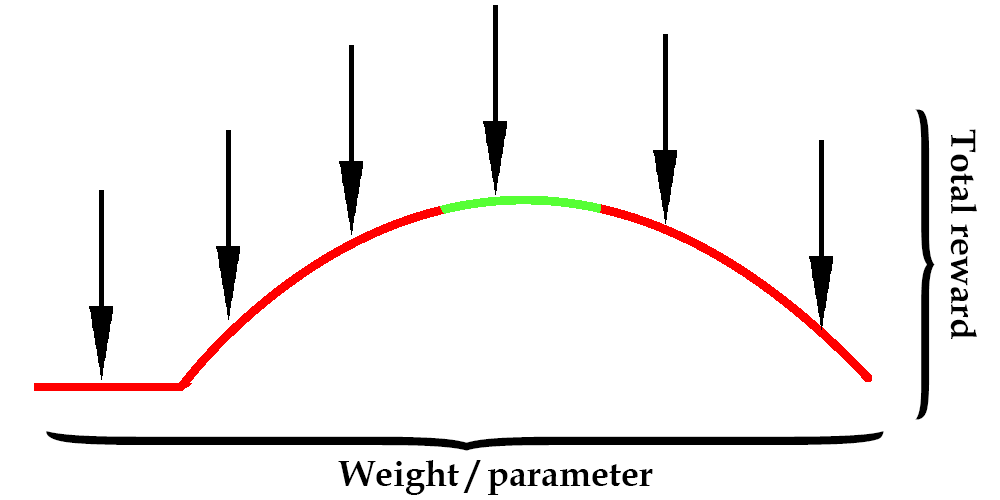
<style>
.page{position:relative;width:1000px;height:500px;background:#ffffff}
.page>*{position:absolute;margin:0}
.t1{font:333.6px "BookAntiqua-Bold";color:#000000;scale:0.21 1}
.t2{font:36px "BookAntiqua-Bold";color:#000000}
.t3{font:904.1px "BookAntiqua-Bold";color:#000000;scale:0.08 1}
</style>
<div class="page">
<p class="t1" style="left:915px;top:109px;width:20px;height:311px">}</p>
<p class="t2" style="left:950px;top:129px;width:27px;height:210px;rotate:90deg">Total reward</p>
<p class="t3" style="left:46px;top:431px;width:838px;height:20px;rotate:90deg">}</p>
<p class="t2" style="left:338px;top:460px;width:315px;height:35px">Weight / parameter</p>
</div>
